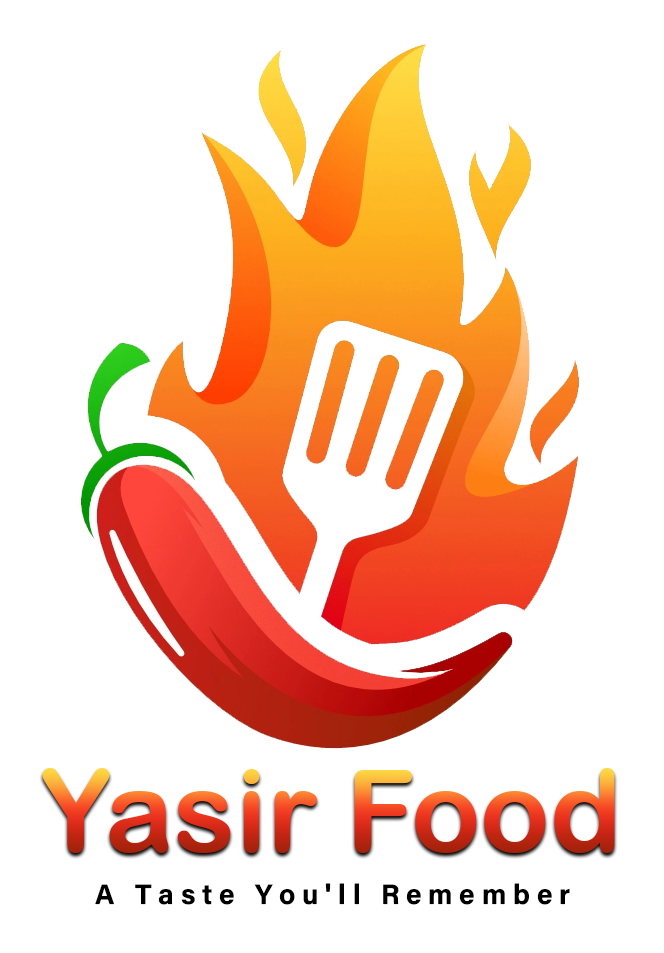
<style>
.page{position:relative;width:664px;height:953px;background:#ffffff}
.page>*{position:absolute;margin:0}
.t1{font:115px "ArialRoundedMTBold"}
.t2{font:28.1px "AcuminConcept-Bold";color:#000000}
</style>
<div class="page">
<p class="t1" style="left:42px;top:768px;width:573px;height:85px">Yasir Food</p>
<p class="t2" style="left:95px;top:883px;width:475px;height:22px">A   T a s t e   Y o u ' l l   R e m e m b e r</p>
</div>
